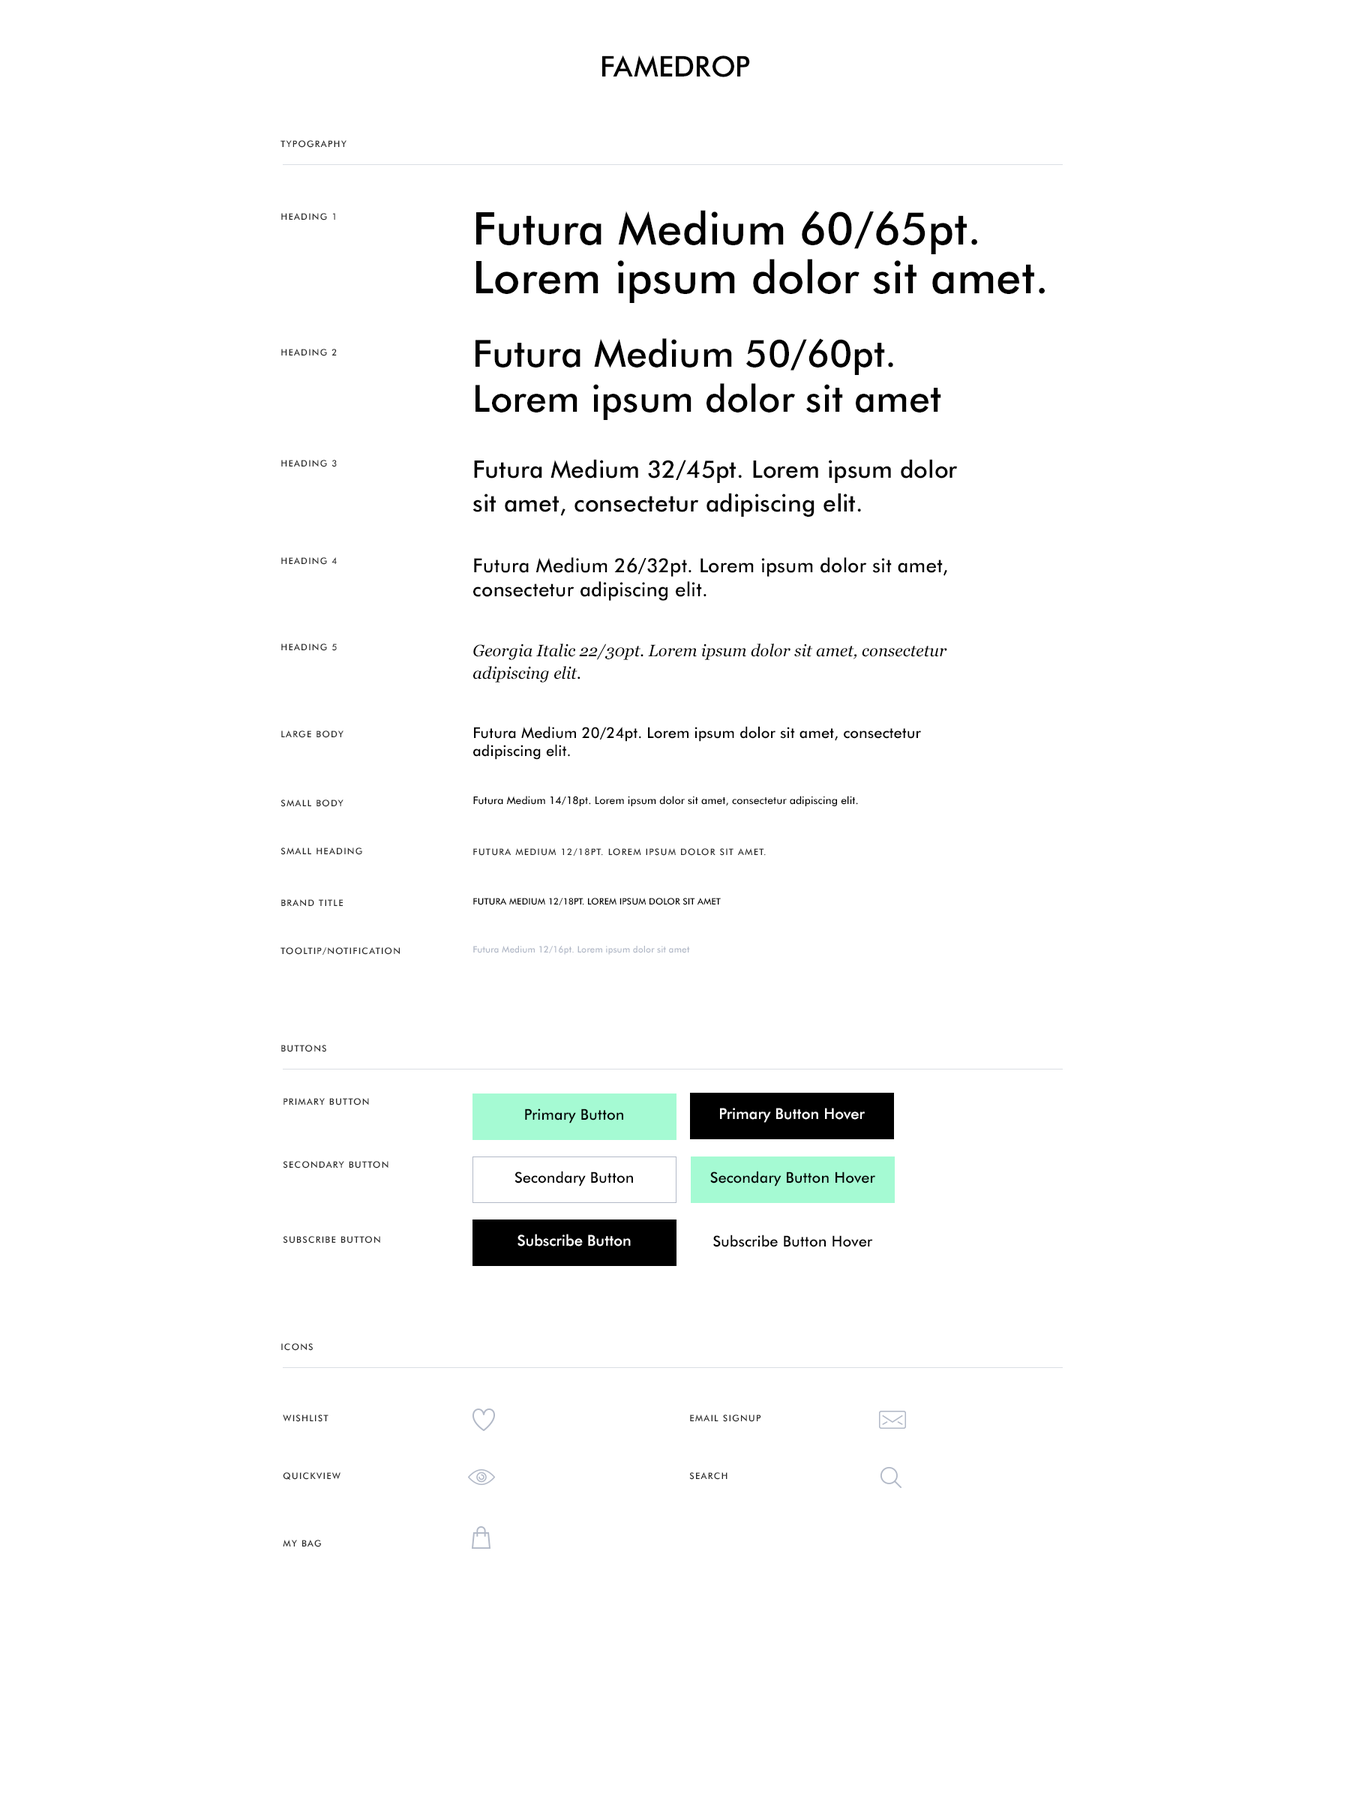
<style>
.page{position:relative;width:1350px;height:1800px;background:#ffffff}
.page>*{position:absolute;margin:0}
.t1{font:28.5px "FuturaBT-Medium";color:#000000;text-transform:uppercase}
.t2{font:9px "FuturaBT-Medium";letter-spacing:0.1em;color:#282828;text-transform:uppercase}
.t3{font:45px/48.8px "FuturaBT-Medium";color:#000000}
.t4{font:37.5px/45px "FuturaBT-Medium";color:#000000}
.t5{font:24px/33.8px "FuturaBT-Medium";color:#000000}
.t6{font:19.5px/24px "FuturaBT-Medium";color:#000000}
.t7{font:16.5px/22.5px "Georgia-Italic";color:#000000}
.t8{font:15px/18px "FuturaBT-Medium";color:#000000}
.t9{font:10.5px "FuturaBT-Medium";color:#000000}
.t10{font:9px "FuturaBT-Medium";color:#000000;text-transform:uppercase}
.t11{font:9px "FuturaBT-Medium";color:#b2b9c7}
.t12{font:15px "FuturaBT-Medium";color:#000000}
.t13{font:15px "FuturaBT-Medium";color:#ffffff}
</style>
<div class="page">
<p class="t1" style="left:602px;top:55px;width:148px;height:22px">Famedrop</p>
<p class="t2" style="left:280px;top:140px;width:66px;height:8px">TYPOGRAPHY</p>
<p class="t2" style="left:281px;top:213px;width:54px;height:7px">Heading 1</p>
<p class="t3" style="left:476px;top:210px;width:569px;height:93px">Futura Medium 60/65pt.<br>Lorem ipsum dolor sit amet.</p>
<p class="t4" style="left:476px;top:338px;width:465px;height:82px">Futura Medium 50/60pt. Lorem ipsum dolor sit amet</p>
<p class="t2" style="left:281px;top:349px;width:56px;height:7px">Heading 2</p>
<p class="t2" style="left:281px;top:460px;width:56px;height:7px">Heading 3</p>
<p class="t5" style="left:472px;top:459px;width:486px;height:58px">Futura Medium 32/45pt. Lorem ipsum dolor sit amet, consectetur adipiscing elit.</p>
<p class="t2" style="left:281px;top:557px;width:56px;height:8px">Heading 4</p>
<p class="t6" style="left:473px;top:557px;width:474px;height:44px">Futura Medium 26/32pt. Lorem ipsum dolor sit amet, consectetur adipiscing elit.</p>
<p class="t2" style="left:281px;top:644px;width:56px;height:7px">Heading 5</p>
<p class="t7" style="left:473px;top:644px;width:474px;height:38px">Georgia Italic 22/30pt. Lorem ipsum dolor sit amet, consectetur adipiscing elit.</p>
<p class="t8" style="left:473px;top:726px;width:448px;height:34px">Futura Medium 20/24pt. Lorem ipsum dolor sit amet, consectetur adipiscing elit.</p>
<p class="t2" style="left:281px;top:730px;width:63px;height:8px">LArge Body</p>
<p class="t9" style="left:473px;top:796px;width:385px;height:10px">Futura Medium 14/18pt. Lorem ipsum dolor sit amet, consectetur adipiscing elit.</p>
<p class="t2" style="left:280px;top:800px;width:64px;height:7px">SMALL Body</p>
<p class="t2" style="left:280px;top:848px;width:82px;height:7px">SMALL HEADING</p>
<p class="t2" style="left:473px;top:848px;width:293px;height:8px">Futura Medium 12/18pt. Lorem ipsum dolor sit amet.</p>
<p class="t2" style="left:281px;top:899px;width:62px;height:8px">BRAND TITLE</p>
<p class="t10" style="left:473px;top:898px;width:248px;height:7px">Futura Medium 12/18pt. Lorem ipsum dolor sit amet</p>
<p class="t2" style="left:280px;top:947px;width:120px;height:8px">Tooltip/notification</p>
<p class="t11" style="left:473px;top:946px;width:217px;height:9px">Futura Medium 12/16pt. Lorem ipsum dolor sit amet</p>
<p class="t2" style="left:281px;top:1045px;width:45px;height:7px">BUTTONS</p>
<p class="t2" style="left:284px;top:1098px;width:85px;height:8px">Primary Button</p>
<p class="t12" style="left:525px;top:1108px;width:98px;height:16px">Primary Button</p>
<p class="t13" style="left:720px;top:1108px;width:145px;height:15px">Primary Button Hover</p>
<p class="t2" style="left:283px;top:1161px;width:105px;height:7px">Secondary Button</p>
<p class="t12" style="left:514px;top:1171px;width:119px;height:15px">Secondary Button</p>
<p class="t12" style="left:710px;top:1171px;width:165px;height:15px">Secondary Button Hover</p>
<p class="t2" style="left:283px;top:1236px;width:97px;height:8px">Subscribe Button</p>
<p class="t13" style="left:518px;top:1234px;width:113px;height:12px">Subscribe Button</p>
<p class="t12" style="left:713px;top:1234px;width:160px;height:13px">Subscribe Button Hover</p>
<p class="t2" style="left:281px;top:1343px;width:32px;height:8px">ICONS</p>
<p class="t2" style="left:283px;top:1414px;width:45px;height:8px">WISHLIST</p>
<p class="t2" style="left:690px;top:1414px;width:71px;height:8px">EMAIl SIGNUP</p>
<p class="t2" style="left:283px;top:1472px;width:57px;height:8px">QUICKVIEW</p>
<p class="t2" style="left:689px;top:1472px;width:39px;height:8px">Search</p>
<p class="t2" style="left:283px;top:1540px;width:38px;height:7px">My BAG</p>
</div>
